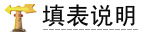
<style>
.page{position:relative;width:150px;height:36px;background:#ffffff}
.page>*{position:absolute;margin:0}
.t1{font:24px "SimHei";color:#0b0a0a}
</style>
<div class="page">
<p class="t1" style="left:42px;top:4px;width:93px;height:23px">填表说明</p>
</div>
